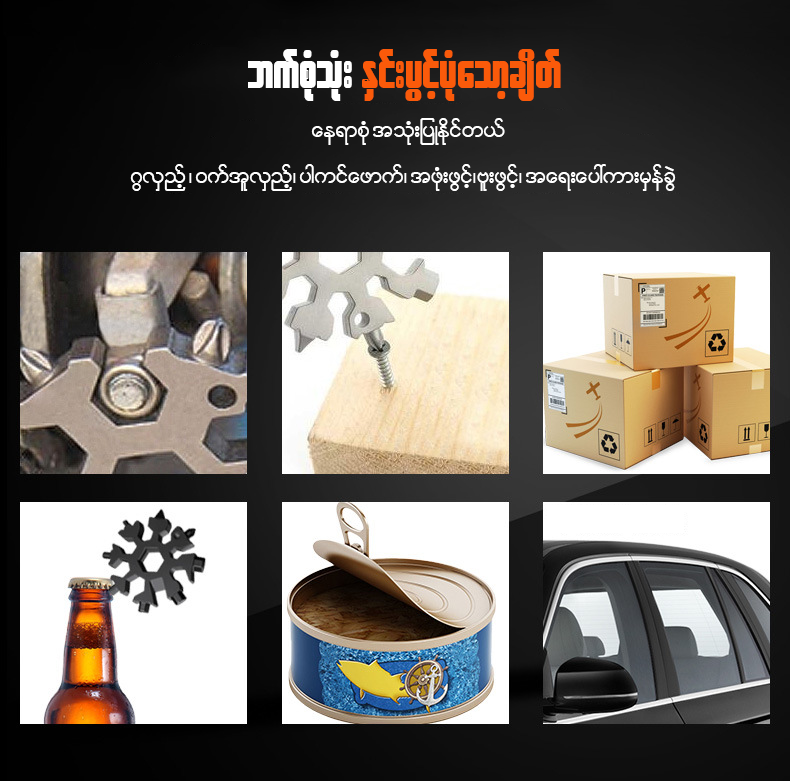
<style>
.page{position:relative;width:790px;height:781px}
.page>*{position:absolute;margin:0}
.t1{font:52.3px "W30ArtHouse";color:#fa5a0a}
.t2{font:52.3px "W30ArtHouse";color:#ffffff}
.t3{font:29.9px "W01ArtHouseWin";color:#ffffff}
</style>
<div class="page">
<p class="t1" style="left:248px;top:49px;width:313px;height:52px"><span class="t2">bufpHkoHk; </span>ESif;yGifhyHkaomhcsdwf</p>
<p class="t3" style="left:311px;top:118px;width:194px;height:27px">ae&amp;mpHk toHk;jyKEdkifw,f</p>
<p class="t3" style="left:130px;top:164px;width:546px;height:27px">*GvSnfh ? 0uftlvSnfh? yguifazmuf? tzHk;zGifh?Al;zGifh? ta&amp;;ay:um;rSefcGJ</p>
</div>
